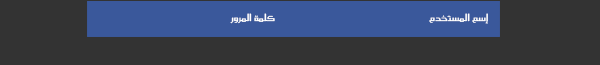
<style>
.page{position:relative;width:600px;height:65px;background:#333333}
.page>*{position:absolute;margin:0}
.t1{font:12px "SC_KHALID";color:#ffffff}
</style>
<div class="page">
<p class="t1" style="left:230px;top:13px;width:45px;height:11px">كلمة  المرور</p>
<p class="t1" style="left:429px;top:13px;width:59px;height:11px">إسم  المستخدم</p>
</div>
